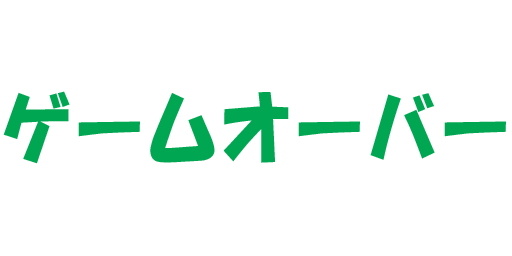
<style>
.page{position:relative;width:512px;height:256px;background:#ffffff}
.page>*{position:absolute;margin:0}
.t1{font:80.5px "HGSoeiKakupoptai";color:#00a651;scale:0.91 1}
</style>
<div class="page">
<p class="t1" style="left:3px;top:91px;width:503px;height:73px">ゲームオーバー</p>
</div>
